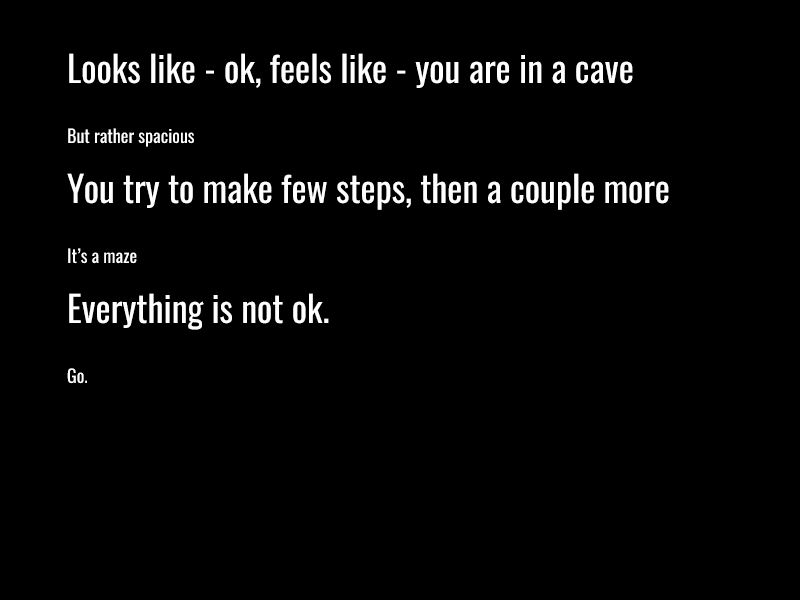
<style>
.page{position:relative;width:800px;height:600px;background:#000000}
.page>*{position:absolute;margin:0}
.t1{font:36px/60px "Oswald-Regular";color:#ffffff}
.t2{font:18px/60px "Oswald-Regular";color:#ffffff}
</style>
<div class="page">
<p class="t1" style="left:67px;top:53px;width:602px;height:331px">Looks like - ok, feels like - you are in a cave<br><span class="t2">But rather spacious<br></span>You try to make few steps, then a couple more<br><span class="t2">It’s a maze<br></span>Everything is not ok. <br><span class="t2">Go.</span></p>
</div>
